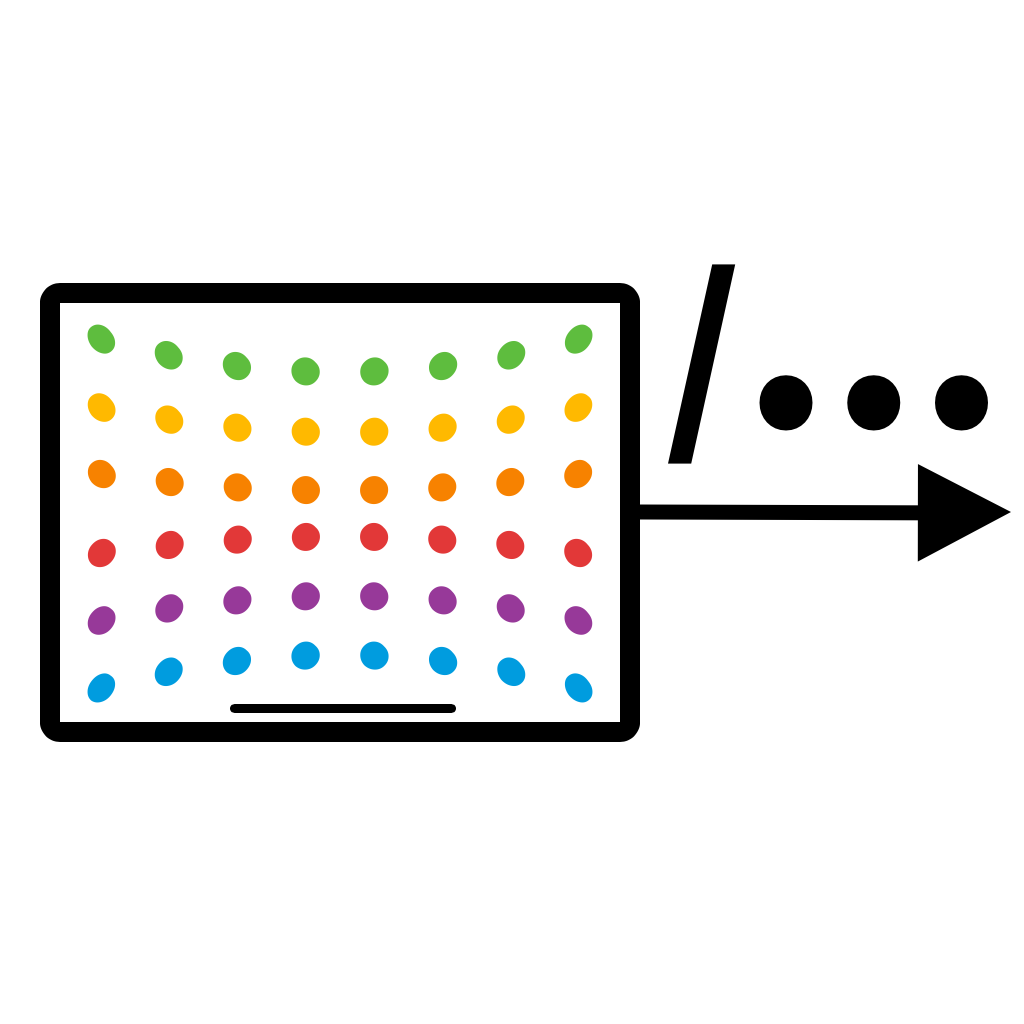
<style>
.page{position:relative;width:1024px;height:1024px;background:#ffffff}
.page>*{position:absolute;margin:0}
.t1{font:250px "SourceHanSans-Heavy";color:#000000}
.t2{font:200px "SourceHanSans-Heavy";color:#000000}
.t3{font:400px "Capsuula";color:#5ebd3e}
.t4{font:400px "Capsuula";color:#ffb900}
.t5{font:400px "Capsuula";color:#f78200}
.t6{font:400px "Capsuula";color:#e23838}
.t7{font:400px "Capsuula";color:#973999}
.t8{font:400px "Capsuula";color:#009cdf}
</style>
<div class="page">
<p class="t1" style="left:668px;top:264px;width:320px;height:200px"><span class="t2">/</span>...</p>
<p class="t3" style="left:87px;top:324px;width:506px;height:62px">........</p>
<p class="t4" style="left:87px;top:393px;width:506px;height:53px">........</p>
<p class="t5" style="left:87px;top:459px;width:506px;height:46px">........</p>
<p class="t6" style="left:87px;top:522px;width:506px;height:46px">........</p>
<p class="t7" style="left:87px;top:582px;width:506px;height:53px">........</p>
<p class="t8" style="left:87px;top:641px;width:506px;height:62px">........</p>
</div>
